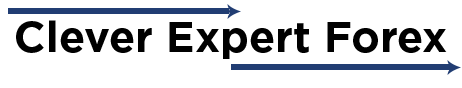
<style>
.page{position:relative;width:462px;height:88px;background:#ffffff}
.page>*{position:absolute;margin:0}
.t1{font:43px "Gotham-Bold";color:#000000}
</style>
<div class="page">
<p class="t1" style="left:16px;top:20px;width:431px;height:39px">Clever Expert Forex</p>
</div>
